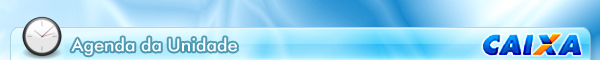
<style>
.page{position:relative;width:600px;height:60px}
.page>*{position:absolute;margin:0}
.t1{font:18px "FuturaBT-Medium";color:#ffffff}
</style>
<div class="page">
<p class="t1" style="left:71px;top:37px;width:167px;height:19px">Agenda da Unidade</p>
</div>
